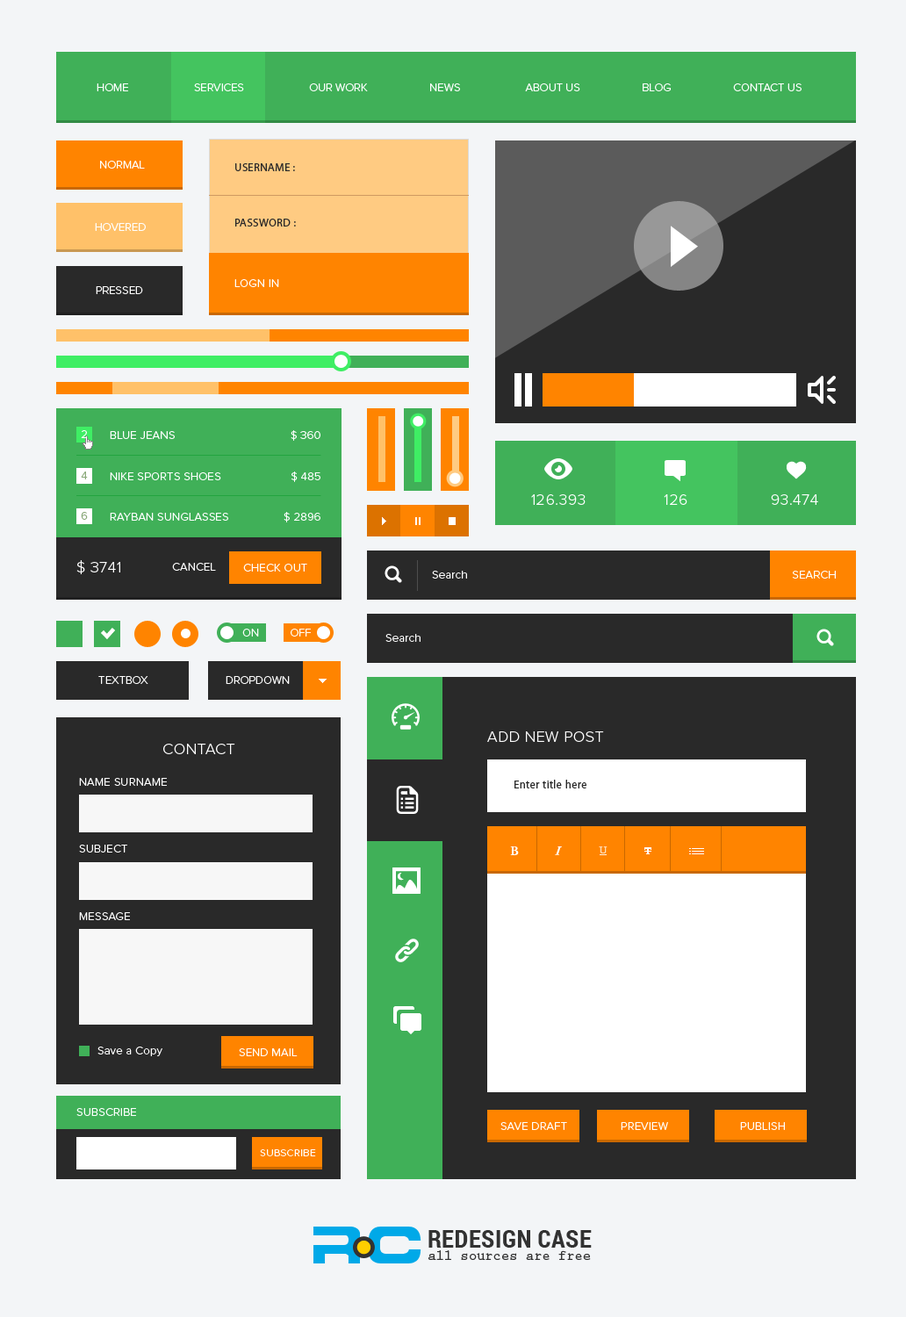
<style>
.page{position:relative;width:906px;height:1317px;background:#f3f5f7}
.page>*{position:absolute;margin:0}
.t1{font:11.4px "ProximaNova-Light";color:#ffffff}
.t2{font:11.4px "MyriadPro-Regular";letter-spacing:0.02em;color:#292929}
.t3{font:11.4px "ProximaNova-Light";letter-spacing:0.02em;color:#ffffff}
.t4{font:11.4px "ProximaNova-Light";letter-spacing:0.02em;color:#8aa97a}
.t5{font:15.8px "ProximaNova-Light";letter-spacing:0.02em;color:#ffffff}
.t6{font:10.5px "ProximaNova-Light";letter-spacing:0.02em;color:#ffffff}
</style>
<div class="page">
<p class="t1" style="left:97px;top:83px;width:704px;height:8px">HOME                      SERVICES                      OUR WORK                     NEWS                      ABOUT US                     BLOG                     CONTACT US</p>
<p class="t1" style="left:100px;top:161px;width:45px;height:8px">NORMAL</p>
<p class="t2" style="left:235px;top:163px;width:60px;height:8px">USERNAME :</p>
<p class="t2" style="left:235px;top:219px;width:61px;height:7px">PASSWORD :</p>
<p class="t1" style="left:95px;top:223px;width:51px;height:8px">HOVERED</p>
<p class="t3" style="left:234px;top:279px;width:45px;height:8px">LOGN IN</p>
<p class="t1" style="left:96px;top:286px;width:47px;height:8px">PRESSED</p>
<p class="t3" style="left:81px;top:430px;width:6px;height:8px">2</p>
<p class="t3" style="left:110px;top:431px;width:65px;height:8px">BLUE JEANS</p>
<p class="t3" style="left:291px;top:430px;width:29px;height:11px">$ 360</p>
<p class="t4" style="left:81px;top:471px;width:7px;height:8px">4</p>
<p class="t3" style="left:110px;top:472px;width:111px;height:8px">NIKE SPORTS SHOES</p>
<p class="t3" style="left:291px;top:471px;width:29px;height:11px">$ 485</p>
<p class="t5" style="left:531px;top:494px;width:54px;height:11px">126.393</p>
<p class="t5" style="left:664px;top:494px;width:23px;height:11px">126</p>
<p class="t5" style="left:771px;top:494px;width:47px;height:11px">93.474</p>
<p class="t4" style="left:81px;top:512px;width:7px;height:8px">6</p>
<p class="t3" style="left:110px;top:513px;width:118px;height:7px">RAYBAN SUNGLASSES</p>
<p class="t3" style="left:283px;top:512px;width:37px;height:10px">$ 2896</p>
<p class="t5" style="left:76px;top:560px;width:44px;height:14px">$ 3741</p>
<p class="t3" style="left:172px;top:563px;width:44px;height:7px">CANCEL</p>
<p class="t3" style="left:243px;top:563px;width:64px;height:8px">CHECK OUT</p>
<p class="t3" style="left:432px;top:570px;width:35px;height:8px">Search</p>
<p class="t3" style="left:792px;top:570px;width:44px;height:8px">SEARCH</p>
<p class="t1" style="left:242px;top:628px;width:17px;height:8px">ON</p>
<p class="t1" style="left:291px;top:628px;width:20px;height:8px">OFF</p>
<p class="t3" style="left:385px;top:634px;width:35px;height:8px">Search</p>
<p class="t1" style="left:98px;top:676px;width:50px;height:8px">TEXTBOX</p>
<p class="t1" style="left:226px;top:676px;width:64px;height:8px">DROPDOWN</p>
<p class="t5" style="left:487px;top:731px;width:117px;height:11px">ADD NEW POST</p>
<p class="t5" style="left:163px;top:743px;width:72px;height:11px">CONTACT</p>
<p class="t3" style="left:79px;top:778px;width:88px;height:8px">NAME SURNAME</p>
<p class="t2" style="left:514px;top:779px;width:72px;height:9px">Enter title here</p>
<p class="t3" style="left:79px;top:844px;width:48px;height:8px">SUBJECT</p>
<p class="t3" style="left:79px;top:912px;width:51px;height:8px">MESSAGE</p>
<p class="t3" style="left:97px;top:1046px;width:65px;height:10px">Save a Copy</p>
<p class="t3" style="left:239px;top:1048px;width:59px;height:8px">SEND MAIL</p>
<p class="t3" style="left:76px;top:1108px;width:60px;height:8px">SUBSCRIBE</p>
<p class="t3" style="left:500px;top:1122px;width:67px;height:8px">SAVE DRAFT</p>
<p class="t3" style="left:621px;top:1122px;width:47px;height:8px">PREVIEW</p>
<p class="t3" style="left:740px;top:1122px;width:45px;height:8px">PUBLISH</p>
<p class="t6" style="left:260px;top:1149px;width:56px;height:7px">SUBSCRIBE</p>
</div>
